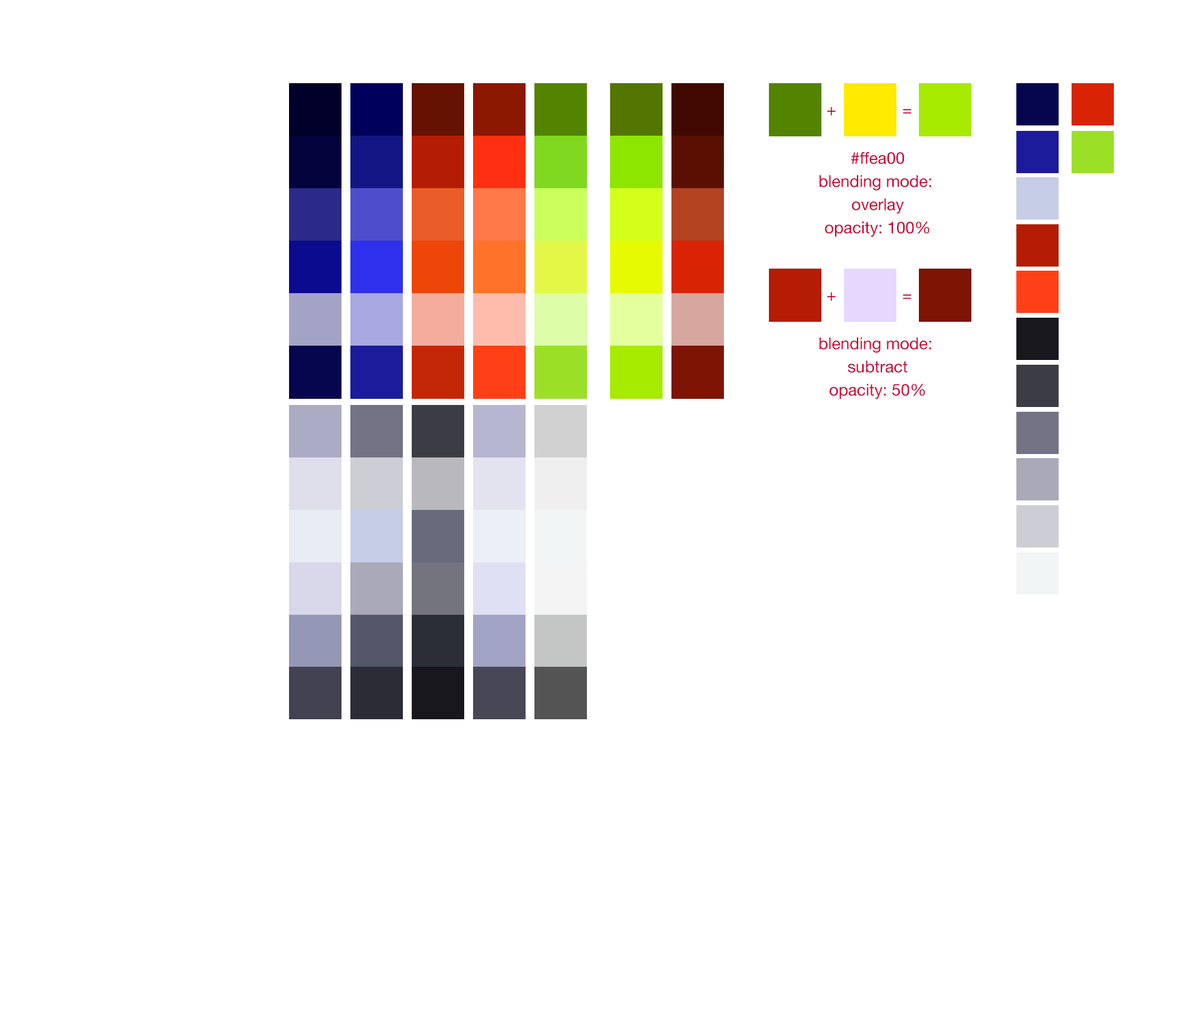
<style>
.page{position:relative;width:1182px;height:1009px;background:#ffffff}
.page>*{position:absolute;margin:0}
.t1{font:16.4px "HelveticaNeue";color:#c90032}
.t2{font:16.4px/23.2px "HelveticaNeue";color:#c90032}
</style>
<div class="page">
<p class="t1" style="left:827px;top:107px;width:9px;height:9px">+</p>
<p class="t1" style="left:903px;top:109px;width:8px;height:5px">=</p>
<p class="t2" style="left:819px;top:152px;width:112px;height:85px;text-align:center">#ffea00<br>blending mode: <br>overlay<br>opacity: 100%</p>
<p class="t1" style="left:827px;top:292px;width:9px;height:9px">+</p>
<p class="t1" style="left:903px;top:294px;width:8px;height:5px">=</p>
<p class="t2" style="left:819px;top:337px;width:112px;height:62px;text-align:center">blending mode: <br>subtract<br>opacity: 50%</p>
</div>
